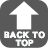
<style>
.page{position:relative;width:48px;height:48px;background:#595959}
.page>*{position:absolute;margin:0}
.t1{font:9px/8px "DFGothic-UB-WINP-RKSJ-H";color:#f9fbfa}
</style>
<div class="page">
<p class="t1" style="left:4px;top:31px;width:41px;height:16px;text-align:center">BACK TO<br>TOP</p>
</div>
